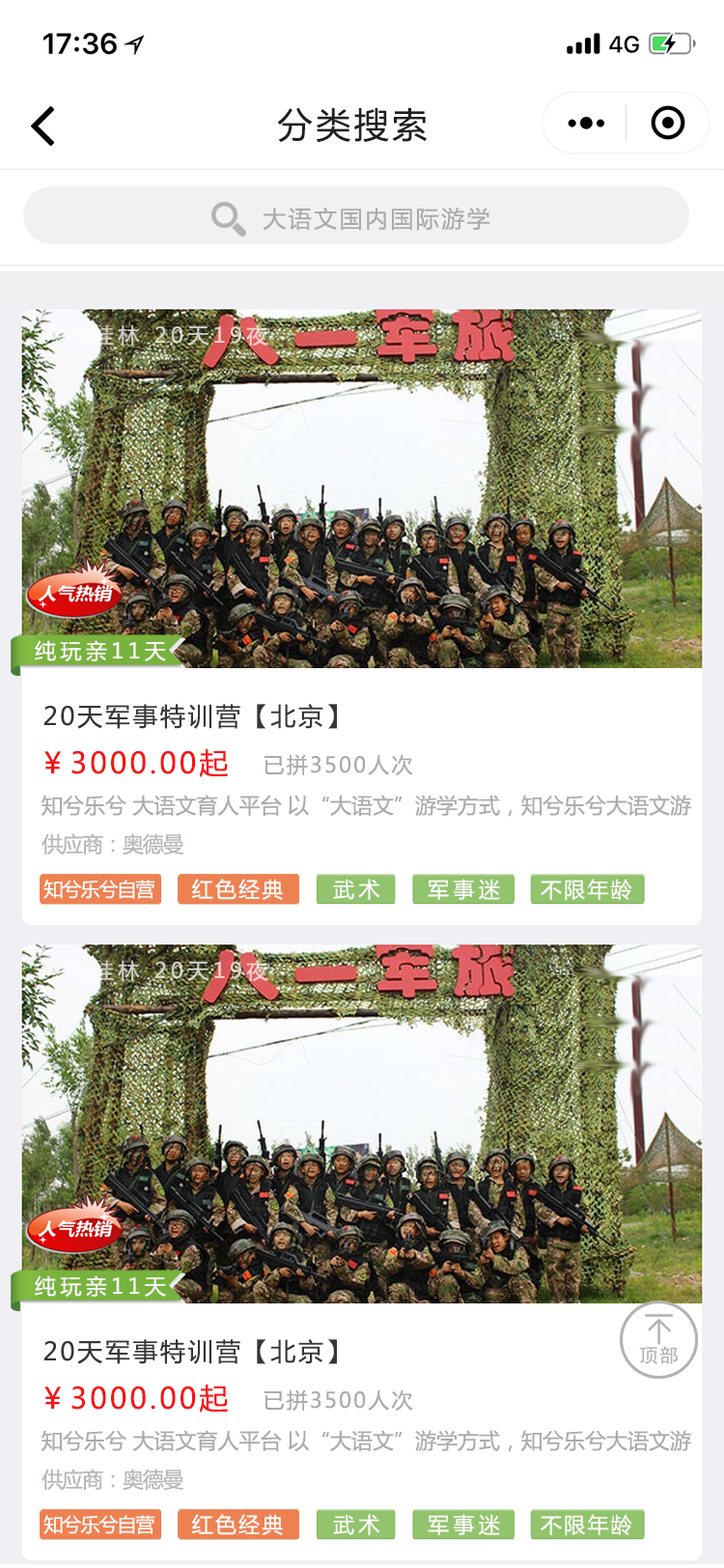
<style>
.page{position:relative;width:724px;height:1568px;background:#ffffff}
.page>*{position:absolute;margin:0}
.t1{font:34.8px "MicrosoftYaHei";letter-spacing:0.1em;color:#201f20}
.t2{font:23.2px "MicrosoftYaHei";letter-spacing:0.1em;color:#abaaaa}
.t3{font:21.2px "MicrosoftYaHei";letter-spacing:0.2em;color:#d4d0ca}
.t4{font:21.2px "MicrosoftYaHei";letter-spacing:0.2em;color:#fcfaf9}
.t5{font:25.1px "MicrosoftYaHei";letter-spacing:0.1em;color:#373636}
.t6{font:29px "MicrosoftYaHei";letter-spacing:0.1em;color:#f71414}
.t7{font:21.2px "MicrosoftYaHei";letter-spacing:0.1em;color:#adaaaa}
.t8{font:21.2px "MicrosoftYaHei";color:#adaaaa}
.t9{font:21.2px "MicrosoftYaHei";letter-spacing:-0.05em;color:#b9b6b5}
.t10{font:19.3px "MicrosoftYaHei";letter-spacing:-0.05em;color:#fdfcfb}
.t11{font:21.2px "MicrosoftYaHei";letter-spacing:0.1em;color:#fdfcfb}
.t12{font:21.2px "MicrosoftYaHei";letter-spacing:0.2em;color:#fdfcfb}
</style>
<div class="page">
<p class="t1" style="left:277px;top:107px;width:150px;height:36px">分类搜索</p>
<p class="t2" style="left:263px;top:207px;width:227px;height:24px">大语文国内国际游学</p>
<p class="t3" style="left:93px;top:324px;width:175px;height:22px">桂林 20天19夜</p>
<p class="t4" style="left:35px;top:640px;width:131px;height:21px">纯玩亲11天</p>
<p class="t5" style="left:43px;top:704px;width:294px;height:25px">20天军事特训营【北京】</p>
<p class="t6" style="left:44px;top:749px;width:184px;height:28px">￥3000.00起</p>
<p class="t7" style="left:265px;top:754px;width:148px;height:22px">已拼3500人次</p>
<p class="t8" style="left:42px;top:795px;width:649px;height:22px">知兮乐兮 大语文育人平台 以“大语文”游学方式，知兮乐兮大语文游</p>
<p class="t9" style="left:42px;top:833px;width:141px;height:22px">供应商：奥德曼</p>
<p class="t10" style="left:43px;top:880px;width:112px;height:19px">知兮乐兮自营</p>
<p class="t11" style="left:192px;top:879px;width:91px;height:21px">红色经典</p>
<p class="t12" style="left:333px;top:879px;width:47px;height:21px">武术</p>
<p class="t12" style="left:428px;top:879px;width:72px;height:21px">军事迷</p>
<p class="t11" style="left:541px;top:879px;width:91px;height:22px">不限年龄</p>
</div>
